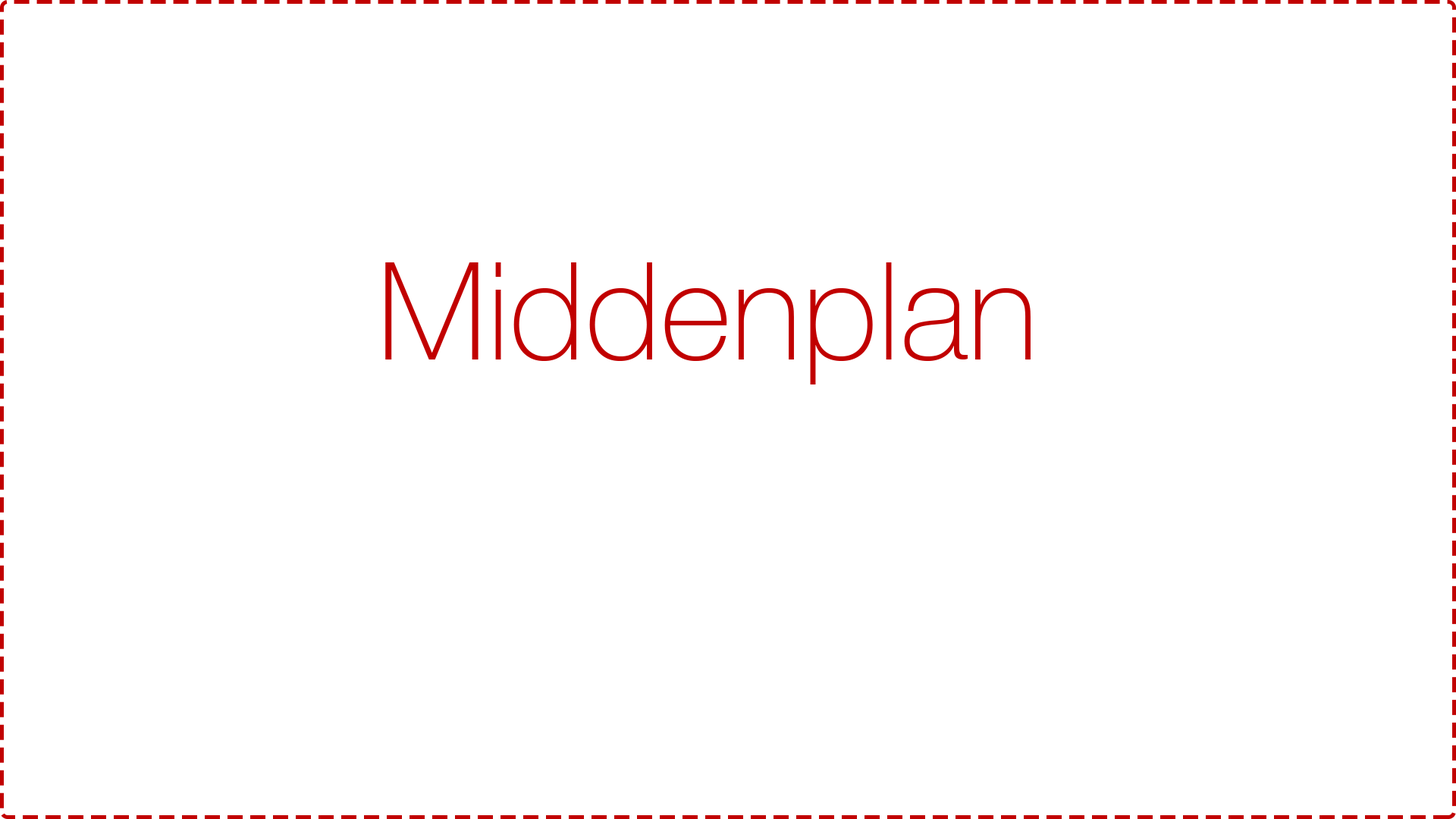
<style>
.page{position:relative;width:1456px;height:819px;background:#ffffff}
.page>*{position:absolute;margin:0}
.t1{font:135.7px "HelveticaNeue-Thin";color:#c10000}
</style>
<div class="page">
<p class="t1" style="left:385px;top:262px;width:646px;height:122px">Middenplan</p>
</div>
